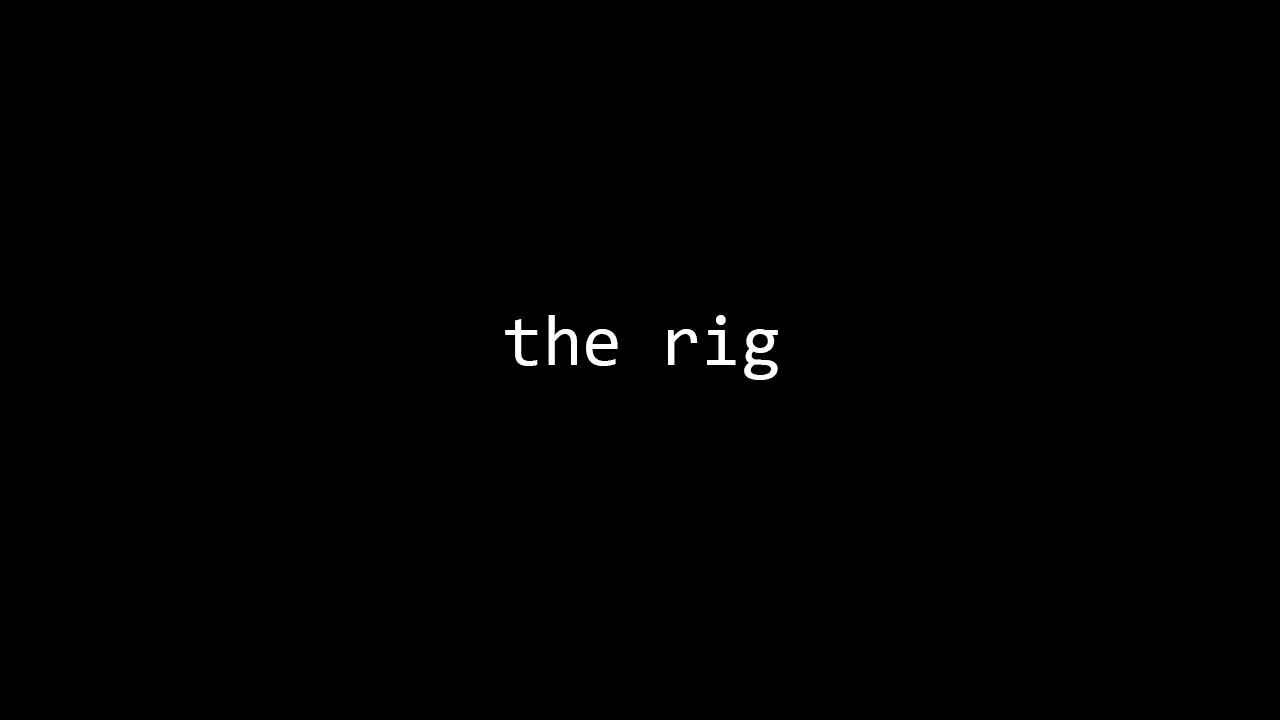
<style>
.page{position:relative;width:1280px;height:720px;background:#000000}
.page>*{position:absolute;margin:0}
.t1{font:72px "Consolas";color:#ffffff}
</style>
<div class="page">
<p class="t1" style="left:505px;top:315px;width:273px;height:65px">the rig</p>
</div>
